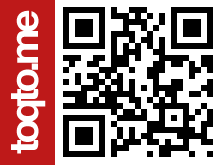
<style>
.page{position:relative;width:219px;height:165px;background:#ffffff}
.page>*{position:absolute;margin:0}
.t1{font:40px "HelveticaNeue-Bold";letter-spacing:-0.1em;color:#ffffff}
</style>
<div class="page">
<p class="t1" style="left:11px;top:10px;width:35px;height:144px;rotate:-90deg">toqto.me</p>
</div>
